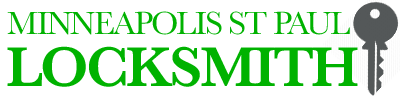
<style>
.page{position:relative;width:400px;height:100px;background:#ffffff}
.page>*{position:absolute;margin:0}
.t1{font:33.3px "Baskerville";letter-spacing:-0.05em;color:#00b200}
.t2{font:58.3px "Baskerville-SemiBold";letter-spacing:-0.05em;color:#00b200}
</style>
<div class="page">
<p class="t1" style="left:7px;top:11px;width:343px;height:24px">MINNEAPOLIS ST PAUL</p>
<p class="t2" style="left:7px;top:46px;width:351px;height:41px">LOCKSMITH</p>
</div>
